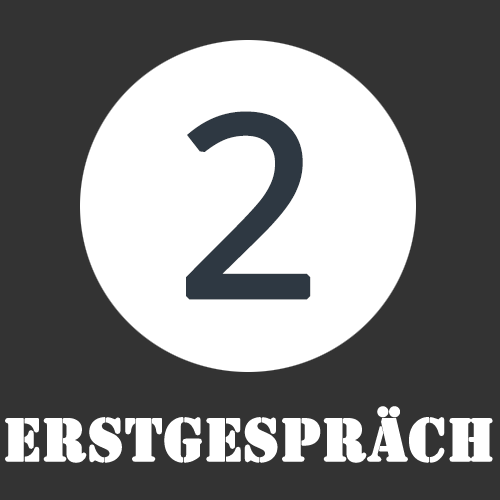
<style>
.page{position:relative;width:500px;height:500px;background:#333333}
.page>*{position:absolute;margin:0}
.t1{font:250px "OpenSans-Regular";color:#2e3842;font-weight:bold}
.t2{font:63px "Stencil";color:#ffffff;font-weight:bold}
</style>
<div class="page">
<p class="t1" style="left:186px;top:111px;width:125px;height:189px">2</p>
<p class="t2" style="left:5px;top:406px;width:488px;height:57px">erstgespräch</p>
</div>
